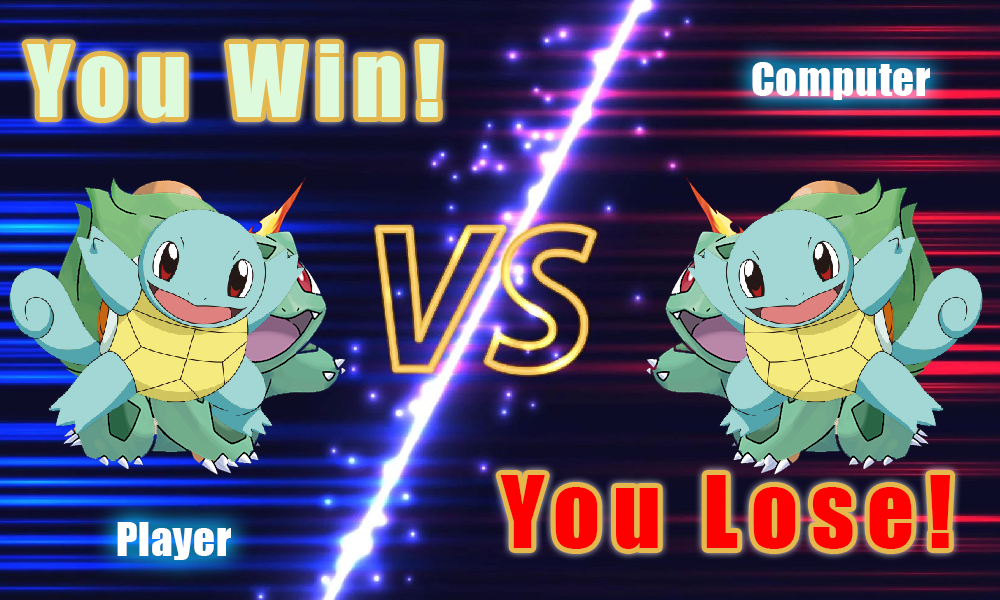
<style>
.page{position:relative;width:1000px;height:600px}
.page>*{position:absolute;margin:0}
.t1{font:92px "Impact";letter-spacing:0.14em;color:#ddfbdc}
.t2{font:43px "Impact";letter-spacing:0.02em;color:#ffffff}
.t3{font:92px "Impact";letter-spacing:0.14em;color:#ff0000}
</style>
<div class="page">
<p class="t1" style="left:26px;top:44px;width:414px;height:74px">You Win!</p>
<p class="t2" style="left:752px;top:62px;width:178px;height:38px">Computer</p>
<p class="t3" style="left:500px;top:475px;width:451px;height:74px">You Lose!</p>
<p class="t2" style="left:117px;top:522px;width:114px;height:38px">Player</p>
</div>
